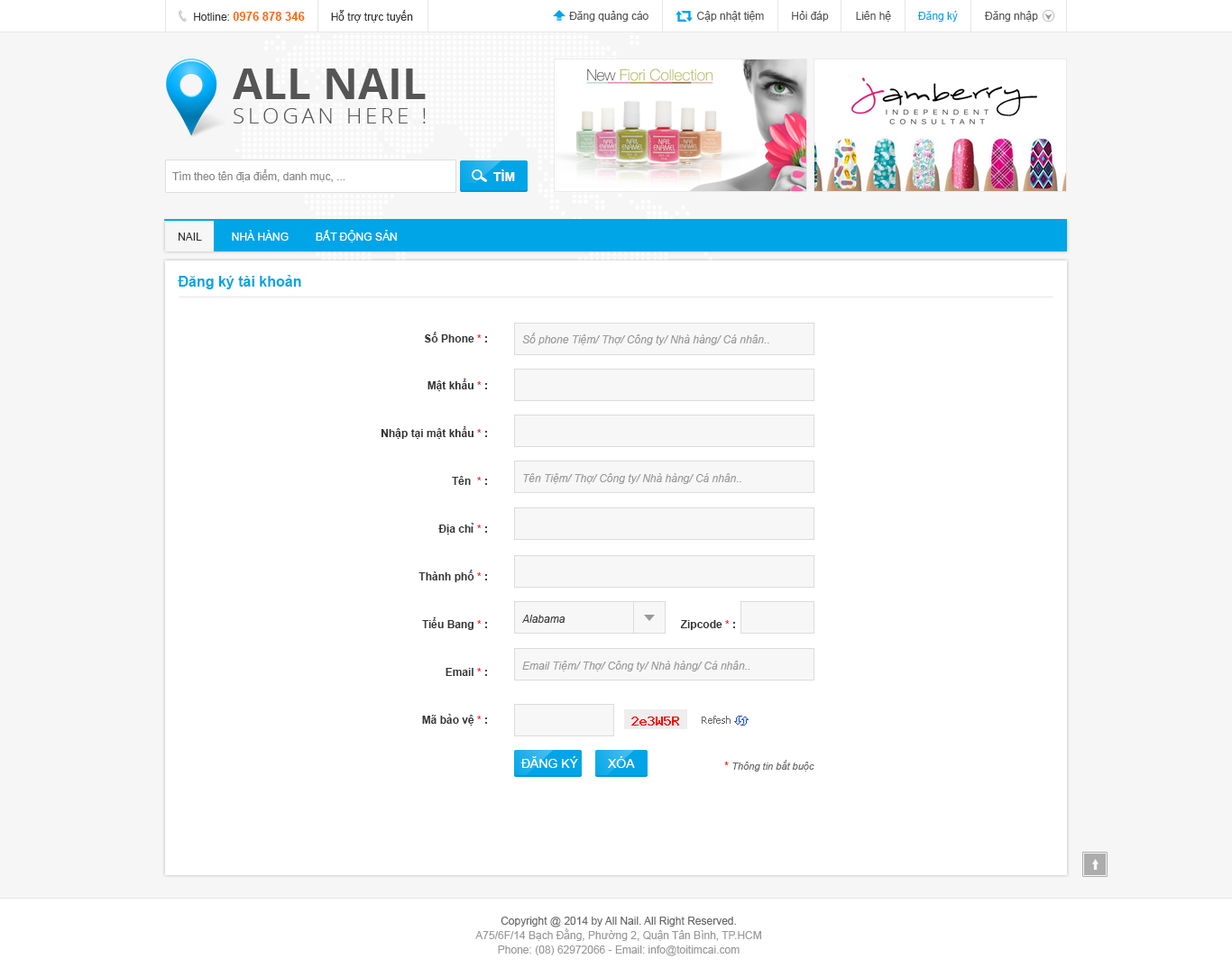
<style>
.page{position:relative;width:1232px;height:968px;background:#ffffff}
.page>*{position:absolute;margin:0}
.t1{font:10.8px "ArialMT";color:#333333}
.t2{font:11.7px "Arial-BoldMT";color:#ff6600;text-transform:uppercase}
.t3{font:10.8px "ArialMT";color:#555555}
.t4{font:10.8px "ArialMT";color:#00a5e7}
.t5{font:43.3px "OpenSans-Bold";color:#555555;text-transform:uppercase}
.t6{font:21.6px "OpenSans-Light";letter-spacing:0.16em;color:#555555;text-transform:uppercase}
.t7{font:10.8px "ArialMT";color:#898888}
.t8{font:12.6px "Arial-BoldMT";color:#ffffff}
.t9{font:10.8px "ArialMT";color:#ffffff;text-transform:uppercase}
.t10{font:10.8px "ArialMT";color:#333333;text-transform:uppercase}
.t11{font:14.4px "Arial-BoldMT";color:#00a5e7}
.t12{font:10.8px/25.2px "Arial-BoldMT";color:#333333}
.t13{font:10.8px/25.2px "Arial-BoldMT";color:#ff0000}
.t14{font:10.8px "Arial-ItalicMT";color:#999999}
.t15{font:10.8px "Arial-ItalicMT";color:#333333}
.t16{font:10.8px "Arial-BoldMT";color:#333333}
.t17{font:10.8px "Arial-BoldMT";color:#ff0000}
.t18{font:9.9px "Tahoma";color:#666666}
.t19{font:12.6px "ArialMT";color:#ffffff;text-transform:uppercase}
.t20{font:9.9px "Arial-ItalicMT";color:#666666}
.t21{font:10.8px/14.4px "ArialMT";color:#999999}
.t22{font:10.8px/14.4px "ArialMT";color:#666666}
</style>
<div class="page">
<p class="t1" style="left:194px;top:10px;width:219px;height:13px">Hotline: <span class="t2">0976 878 346        </span>Hỗ trợ trực tuyến</p>
<p class="t3" style="left:569px;top:11px;width:469px;height:11px">Đăng quảng cáo                Cập nhật tiệm         Hỏi đáp         Liên hệ         <span class="t4">Đăng ký</span>         Đăng nhập</p>
<p class="t5" style="left:233px;top:69px;width:193px;height:30px">all nail</p>
<p class="t6" style="left:234px;top:108px;width:192px;height:16px">Slogan here !</p>
<p class="t7" style="left:172px;top:169px;width:173px;height:13px">Tìm theo tên địa điểm, danh mục, ...</p>
<p class="t8" style="left:493px;top:169px;width:22px;height:12px">TÌM</p>
<p class="t9" style="left:179px;top:230px;width:218px;height:13px"><span class="t10">nail         </span> nhà hàng         Bất động sản</p>
<p class="t11" style="left:178px;top:275px;width:123px;height:14px">Đăng ký tài khoản</p>
<p class="t12" style="left:380px;top:332px;width:107px;height:394px;text-align:right">Số Phone<span class="t13"> * </span>:<br>Mật khẩu<span class="t13"> * </span>:<br>Nhập tại mật khẩu<span class="t13"> * </span>:<br>Tên <span class="t13"> * </span>:<br>Địa chỉ<span class="t13"> * </span>:<br>Thành phố<span class="t13"> * </span>:<br>Tiểu Bang<span class="t13"> * </span>:<br>Email<span class="t13"> * </span>:<br>Mã bảo vệ<span class="t13"> * </span>:</p>
<p class="t14" style="left:522px;top:333px;width:247px;height:12px">Số phone Tiệm/ Thợ/ Công ty/ Nhà hàng/ Cá nhân..</p>
<p class="t14" style="left:523px;top:473px;width:218px;height:11px">Tên Tiệm/ Thợ/ Công ty/ Nhà hàng/ Cá nhân..</p>
<p class="t15" style="left:522px;top:615px;width:43px;height:8px">Alabama</p>
<p class="t16" style="left:680px;top:620px;width:55px;height:10px">Zipcode<span class="t17"> * </span>:</p>
<p class="t14" style="left:522px;top:661px;width:228px;height:11px">Email Tiệm/ Thợ/ Công ty/ Nhà hàng/ Cá nhân..</p>
<p class="t18" style="left:701px;top:716px;width:29px;height:8px">Refesh</p>
<p class="t19" style="left:520px;top:756px;width:58px;height:12px">đăng ký</p>
<p class="t19" style="left:608px;top:756px;width:27px;height:12px">xóa</p>
<p class="t20" style="left:724px;top:760px;width:90px;height:12px"><span class="t17"> * </span>Thông tin bắt buộc</p>
<p class="t21" style="left:475px;top:917px;width:286px;height:40px;text-align:center"><span class="t22">Copyright @ 2014 by All Nail. All Right Reserved.<br></span>A75/6F/14 Bạch Đằng, Phường 2, Quận Tân Bình, TP.HCM<br>Phone: (08) 62972066 - Email: info@toitimcai.com</p>
</div>
